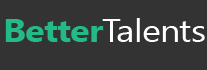
<style>
.page{position:relative;width:207px;height:70px;background:#333333}
.page>*{position:absolute;margin:0}
.t1{font:31.8px "SegoeUI";letter-spacing:-0.02em;color:#ffffff;scale:1.12 1}
.t2{font:31.8px "SegoeUI-Bold";letter-spacing:-0.02em;color:#23ba85;scale:1.12 1}
</style>
<div class="page">
<p class="t1" style="left:5px;top:18px;width:200px;height:24px"><span class="t2">Better</span>Talents</p>
</div>
